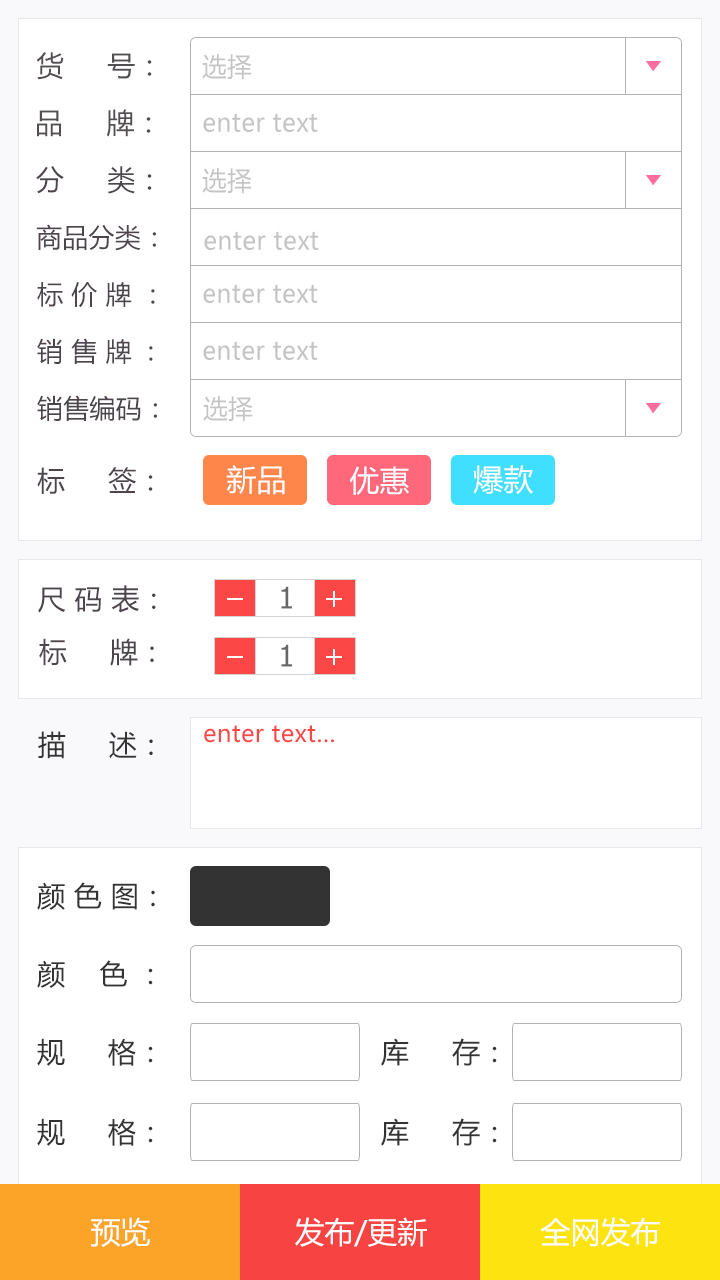
<style>
.page{position:relative;width:720px;height:1280px;background:#ffffff}
.page>*{position:absolute;margin:0}
.t1{font:28px "MicrosoftYaHei";letter-spacing:0.01em;color:#524e52}
.t2{font:26px "MicrosoftYaHei";letter-spacing:0.01em;color:#c4c4c4;scale:0.95 1}
.t3{font:28px "MicrosoftYaHei";letter-spacing:0.01em;color:#4c454c}
.t4{font:26px "MicrosoftYaHei";letter-spacing:0.01em;color:#4c454c}
.t5{font:30px "MicrosoftYaHei";letter-spacing:0.01em;color:#ffffff}
.t6{font:30px "Tahoma";color:#666666}
.t7{font:24px "MicrosoftYaHei";letter-spacing:0.01em;color:#fc4747}
.t8{font:28px "MicrosoftYaHei";letter-spacing:0.01em;color:#333333}
.t9{font:30px "MicrosoftYaHei";color:#ffffff}
</style>
<div class="page">
<p class="t1" style="left:36px;top:52px;width:116px;height:28px">货     号：</p>
<p class="t2" style="left:202px;top:54px;width:50px;height:26px">选择</p>
<p class="t1" style="left:37px;top:109px;width:114px;height:28px">品     牌：</p>
<p class="t2" style="left:203px;top:113px;width:115px;height:19px">enter text</p>
<p class="t3" style="left:36px;top:166px;width:116px;height:28px">分     类：</p>
<p class="t2" style="left:202px;top:168px;width:50px;height:26px">选择</p>
<p class="t4" style="left:36px;top:224px;width:120px;height:27px">商品分类：</p>
<p class="t2" style="left:204px;top:231px;width:115px;height:19px">enter text</p>
<p class="t4" style="left:37px;top:282px;width:118px;height:26px">标 价 牌 ：</p>
<p class="t2" style="left:203px;top:284px;width:115px;height:19px">enter text</p>
<p class="t4" style="left:37px;top:338px;width:116px;height:26px">销 售 牌  :</p>
<p class="t2" style="left:203px;top:341px;width:115px;height:19px">enter text</p>
<p class="t4" style="left:37px;top:395px;width:120px;height:26px">销售编码：</p>
<p class="t2" style="left:203px;top:396px;width:50px;height:26px">选择</p>
<p class="t3" style="left:37px;top:467px;width:116px;height:27px">标     签：</p>
<p class="t5" style="left:226px;top:465px;width:59px;height:30px">新品</p>
<p class="t5" style="left:349px;top:466px;width:60px;height:29px">优惠</p>
<p class="t5" style="left:473px;top:465px;width:60px;height:29px">爆款</p>
<p class="t3" style="left:38px;top:585px;width:118px;height:28px">尺 码 表：</p>
<p class="t6" style="left:281px;top:586px;width:11px;height:23px">1</p>
<p class="t3" style="left:39px;top:638px;width:115px;height:28px">标     牌：</p>
<p class="t6" style="left:281px;top:644px;width:11px;height:23px">1</p>
<p class="t7" style="left:204px;top:725px;width:130px;height:18px">enter text…</p>
<p class="t8" style="left:37px;top:882px;width:118px;height:28px">颜 色 图：</p>
<p class="t8" style="left:37px;top:960px;width:116px;height:28px">颜    色 ：</p>
<p class="t8" style="left:37px;top:1038px;width:116px;height:28px">规     格：</p>
<p class="t8" style="left:381px;top:1038px;width:116px;height:28px">库     存：</p>
<p class="t8" style="left:37px;top:1118px;width:116px;height:28px">规     格：</p>
<p class="t8" style="left:381px;top:1118px;width:116px;height:28px">库     存：</p>
<p class="t9" style="left:91px;top:1217px;width:59px;height:30px">预览</p>
<p class="t9" style="left:295px;top:1217px;width:132px;height:30px">发布/更新</p>
<p class="t9" style="left:540px;top:1217px;width:120px;height:30px">全网发布</p>
</div>
